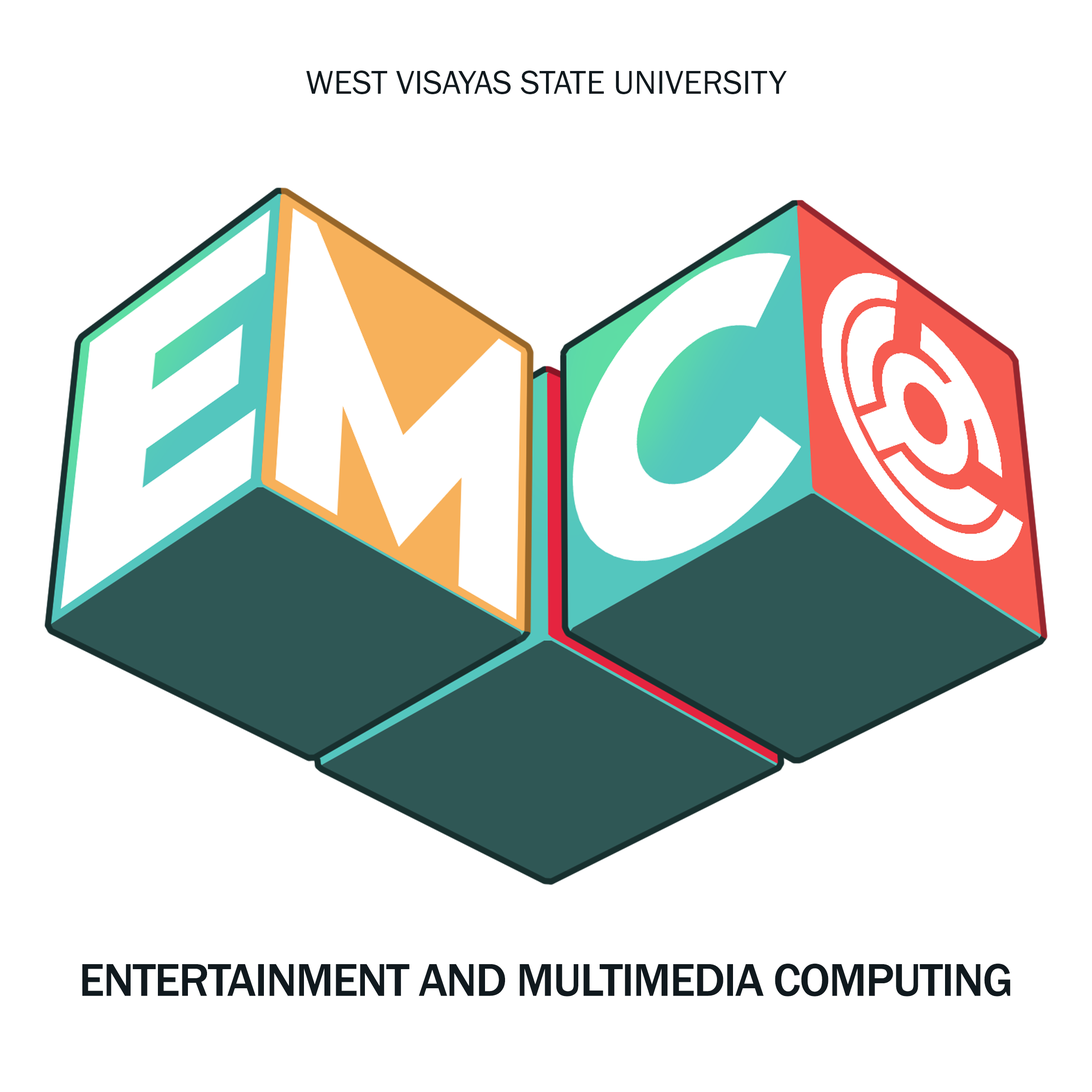
<style>
.page{position:relative;width:1092px;height:1092px;background:#ffffff}
.page>*{position:absolute;margin:0}
.t1{font:34.1px "FranklinGothic-Book";color:#10191e}
.t2{font:47.4px "FranklinGothic-Medium";letter-spacing:-0.025em;color:#10191e}
</style>
<div class="page">
<p class="t1" style="left:306px;top:71px;width:481px;height:23px">WEST VISAYAS STATE UNIVERSITY</p>
<p class="t2" style="left:82px;top:963px;width:929px;height:33px">ENTERTAINMENT AND MULTIMEDIA COMPUTING</p>
</div>
